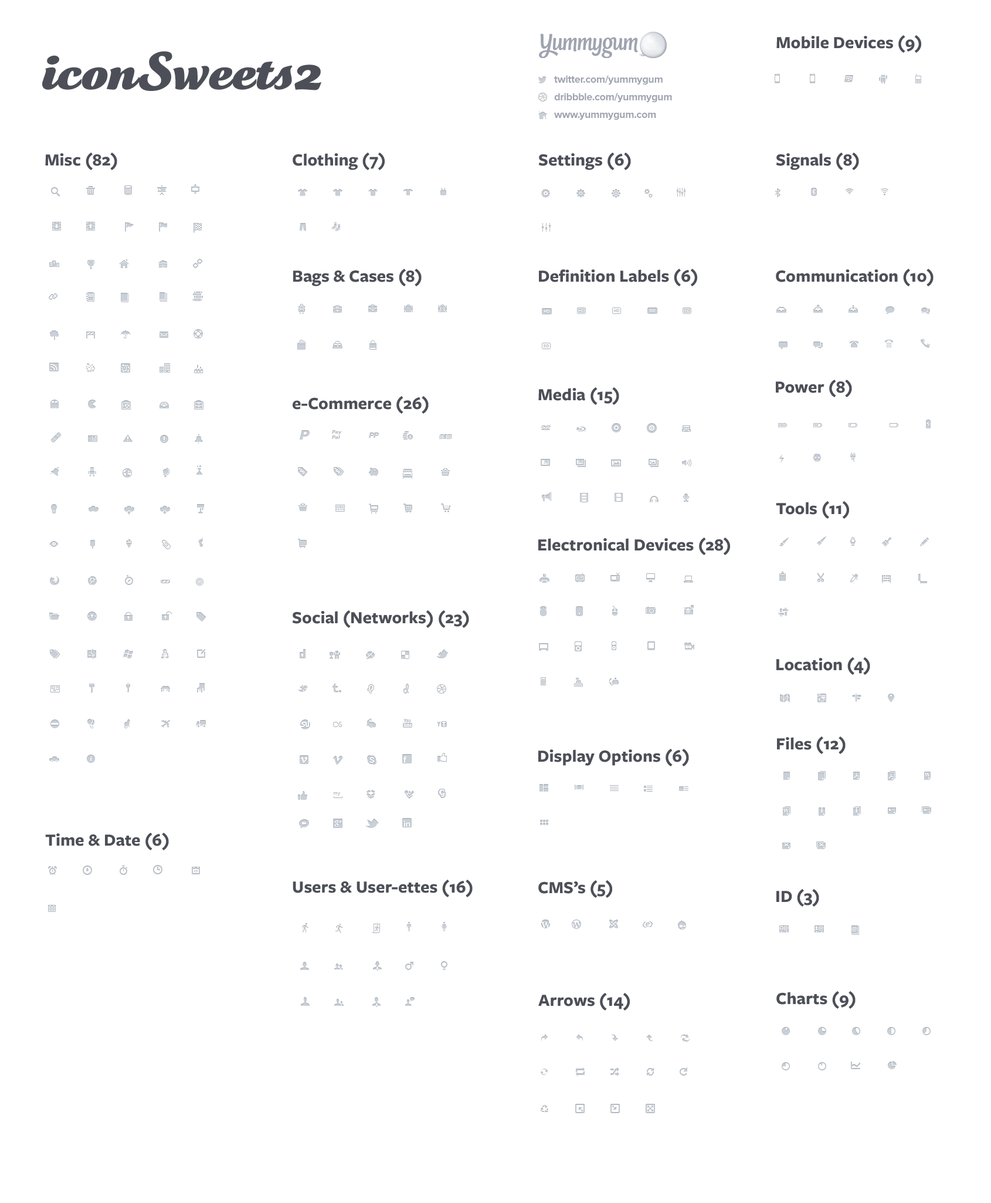
<style>
.page{position:relative;width:991px;height:1203px;background:#ffffff}
.page>*{position:absolute;margin:0}
.t1{font:17.6px "FreightSansProBold-Regular";color:#4d4f58}
.t2{font:52.8px "TartineScriptBlack";color:#4d4f58}
.t3{font:10.6px/17.6px "ProximaNova-Bold";letter-spacing:-0.02em;color:#9fa3b0}
</style>
<div class="page">
<p class="t1" style="left:777px;top:35px;width:145px;height:18px">Mobile Devices (9)</p>
<p class="t2" style="left:42px;top:51px;width:279px;height:40px">iconSweets2</p>
<p class="t3" style="left:554px;top:75px;width:118px;height:45px">twitter.com/yummygum<br>dribbble.com/yummygum<br>www.yummygum.com</p>
<p class="t1" style="left:45px;top:153px;width:72px;height:17px">Misc (82)</p>
<p class="t1" style="left:293px;top:153px;width:92px;height:17px">Clothing (7)</p>
<p class="t1" style="left:539px;top:153px;width:92px;height:17px">Settings (6)</p>
<p class="t1" style="left:776px;top:153px;width:83px;height:17px">Signals (8)</p>
<p class="t1" style="left:293px;top:269px;width:129px;height:17px">Bags &amp; Cases (8)</p>
<p class="t1" style="left:539px;top:269px;width:159px;height:17px">Definition Labels (6)</p>
<p class="t1" style="left:776px;top:269px;width:158px;height:17px">Communication (10)</p>
<p class="t1" style="left:539px;top:387px;width:81px;height:18px">Media (15)</p>
<p class="t1" style="left:776px;top:380px;width:76px;height:17px">Power (8)</p>
<p class="t1" style="left:293px;top:396px;width:136px;height:18px">e-Commerce (26)</p>
<p class="t1" style="left:776px;top:501px;width:74px;height:18px">Tools (11)</p>
<p class="t1" style="left:539px;top:537px;width:191px;height:18px">Electronical Devices (28)</p>
<p class="t1" style="left:292px;top:610px;width:177px;height:18px">Social (Networks) (23)</p>
<p class="t1" style="left:777px;top:657px;width:94px;height:18px">Location (4)</p>
<p class="t1" style="left:777px;top:736px;width:69px;height:18px">Files (12)</p>
<p class="t1" style="left:539px;top:749px;width:150px;height:17px">Display Options (6)</p>
<p class="t1" style="left:45px;top:832px;width:124px;height:18px">Time &amp; Date (6)</p>
<p class="t1" style="left:293px;top:879px;width:180px;height:18px">Users &amp; User-ettes (16)</p>
<p class="t1" style="left:539px;top:880px;width:73px;height:18px">CMS’s (5)</p>
<p class="t1" style="left:777px;top:889px;width:43px;height:17px">ID (3)</p>
<p class="t1" style="left:539px;top:993px;width:91px;height:17px">Arrows (14)</p>
<p class="t1" style="left:777px;top:991px;width:79px;height:17px">Charts (9)</p>
</div>
